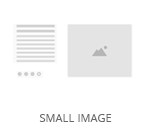
<style>
.page{position:relative;width:150px;height:130px;background:#ffffff}
.page>*{position:absolute;margin:0}
.t1{font:11px "OpenSans";color:#686868;text-transform:uppercase}
</style>
<div class="page">
<p class="t1" style="left:39px;top:114px;width:73px;height:8px">Small Image</p>
</div>
